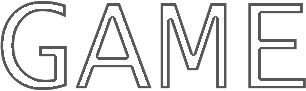
<style>
.page{position:relative;width:306px;height:91px;background:#ffffff}
.page>*{position:absolute;margin:0}
.t1{font:134.5px "LucidaConsole";letter-spacing:0.02em;scale:0.95 1}
</style>
<div class="page">
<p class="t1" style="left:0px;top:1px;width:306px;height:89px">GAME</p>
</div>
